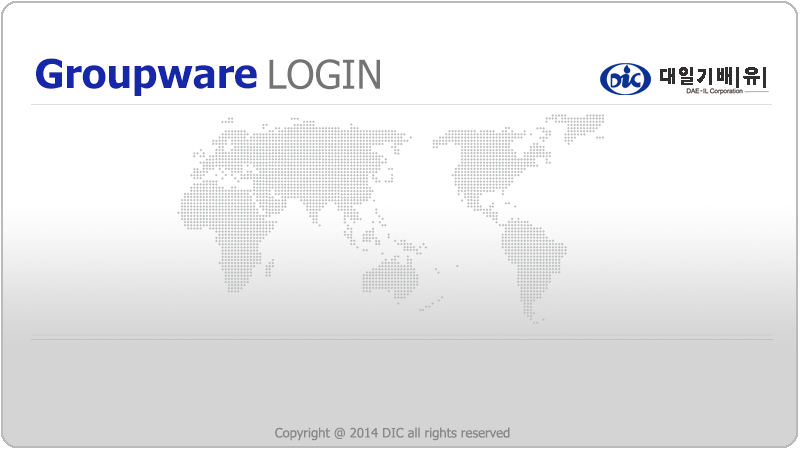
<style>
.page{position:relative;width:800px;height:450px;background:#ffffff}
.page>*{position:absolute;margin:0}
.t1{font:40px "Tahoma-Bold";color:#1627aa}
.t2{font:40px "Tahoma";color:#747474}
.t3{font:13px "Tahoma";color:#888888}
</style>
<div class="page">
<p class="t1" style="left:36px;top:58px;width:221px;height:38px">Groupware</p>
<p class="t2" style="left:269px;top:59px;width:111px;height:31px">LOGIN</p>
<p class="t3" style="left:275px;top:427px;width:235px;height:14px">Copyright @ 2014 DIC all rights reserved</p>
</div>
